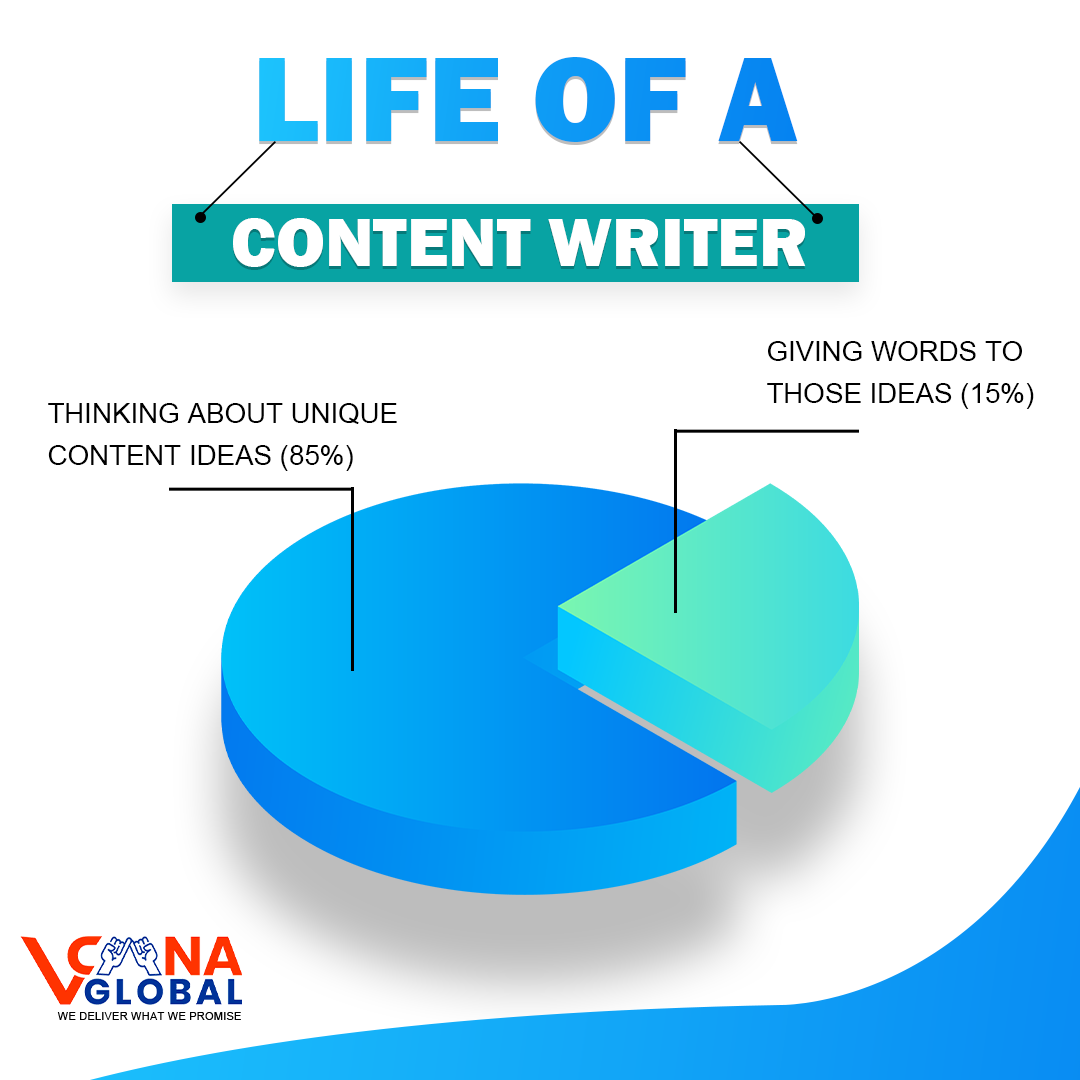
<style>
.page{position:relative;width:1080px;height:1080px;background:#ffffff}
.page>*{position:absolute;margin:0}
.t1{font:30px/125px "FranklinGothic-Heavy";text-transform:uppercase}
.t2{font:17.1px/71.1px "FranklinGothic-Heavy";color:#ffffff;text-transform:uppercase}
.t3{font:27.7px/41.5px "ArialMT";color:#000000;text-transform:uppercase}
</style>
<div class="page">
<p class="t1" style="left:259px;top:57px;width:539px;height:85px">LIFE of a</p>
<p class="t2" style="left:233px;top:218px;width:573px;height:49px">Content Writer</p>
<p class="t3" style="left:767px;top:341px;width:267px;height:68px">Giving words to <br>those ideas (15%)</p>
<p class="t3" style="left:48px;top:403px;width:349px;height:68px">Thinking about unique <br>content ideas (85%)</p>
</div>
